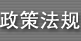
<style>
.page{position:relative;width:81px;height:41px}
.page>*{position:absolute;margin:0}
.t1{font:20px "SimHei";letter-spacing:0.02em;color:#ffffff}
</style>
<div class="page">
<p class="t1" style="left:0px;top:10px;width:80px;height:20px">政策法规</p>
</div>
